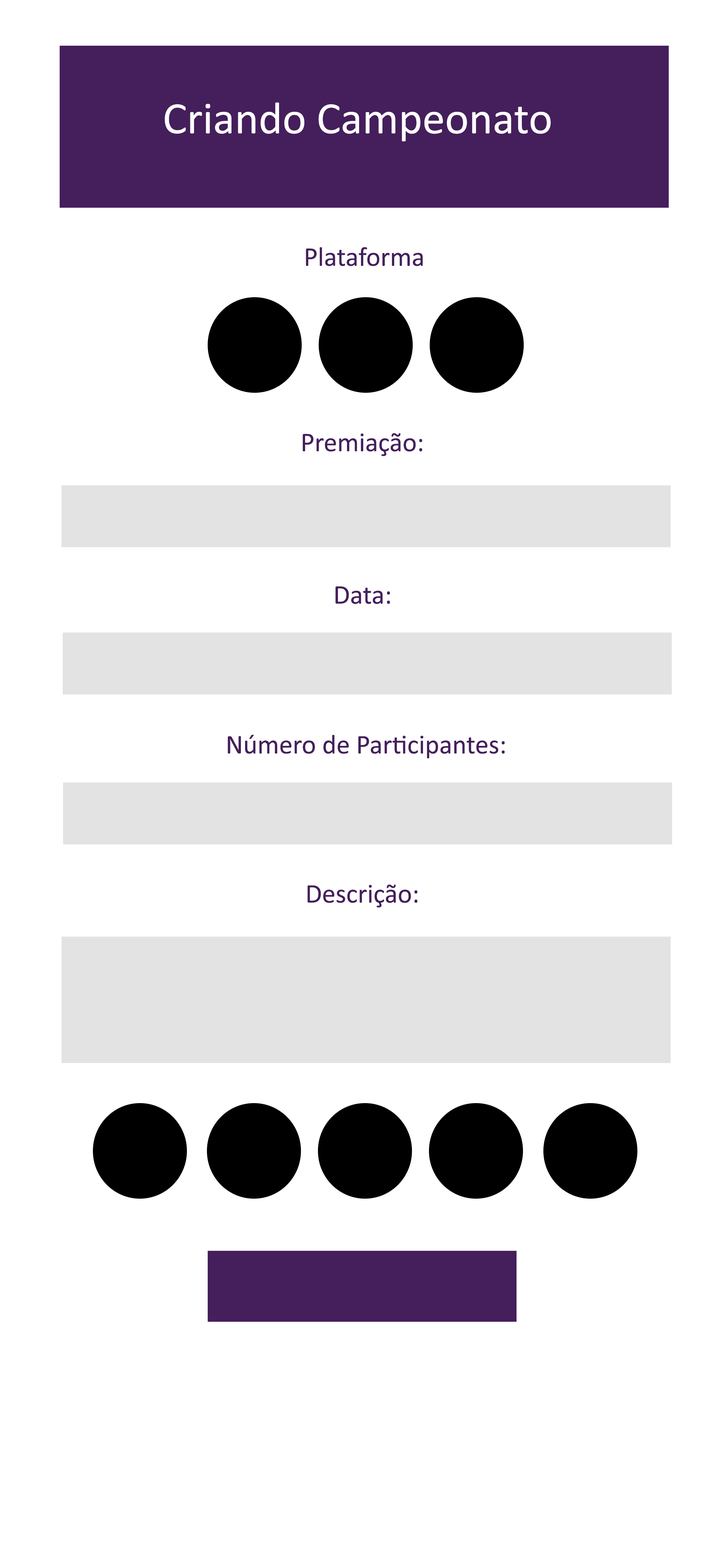
<style>
.page{position:relative;width:725px;height:1568px;background:#ffffff}
.page>*{position:absolute;margin:0}
.t1{font:45.3px "Calibri";color:#ffffff}
.t2{font:27.2px "Calibri";color:#451e5c}
</style>
<div class="page">
<p class="t1" style="left:165px;top:102px;width:386px;height:40px">Criando Campeonato</p>
<p class="t2" style="left:306px;top:247px;width:117px;height:19px">Plataforma</p>
<p class="t2" style="left:302px;top:433px;width:120px;height:23px">Premiação:</p>
<p class="t2" style="left:335px;top:586px;width:55px;height:18px">Data:</p>
<p class="t2" style="left:228px;top:735px;width:277px;height:23px">Número de Participantes:</p>
<p class="t2" style="left:307px;top:884px;width:111px;height:23px">Descrição:</p>
</div>
